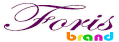
<style>
.page{position:relative;width:119px;height:42px;background:#ffffff}
.page>*{position:absolute;margin:0}
.t1{font:40.1px "EdwardianScriptITC";color:#67015d;scale:1.72 1}
.t2{font:12.9px "Bauhaus93";color:#f88101;scale:1.43 1}
.t3{font:12.9px "Bauhaus93";color:#e3e530;scale:1.43 1}
.t4{font:12.9px "Bauhaus93";color:#14c610;scale:1.43 1}
.t5{font:12.9px "Bauhaus93";color:#d611b8;scale:1.43 1}
.t6{font:12.9px "Bauhaus93";color:#00ccff;scale:1.43 1}
</style>
<div class="page">
<p class="t1" style="left:4px;top:3px;width:110px;height:28px">Foris</p>
<p class="t2" style="left:66px;top:32px;width:48px;height:9px">b<span class="t3">r</span><span class="t4">a</span><span class="t5">n</span><span class="t6">d</span></p>
</div>
